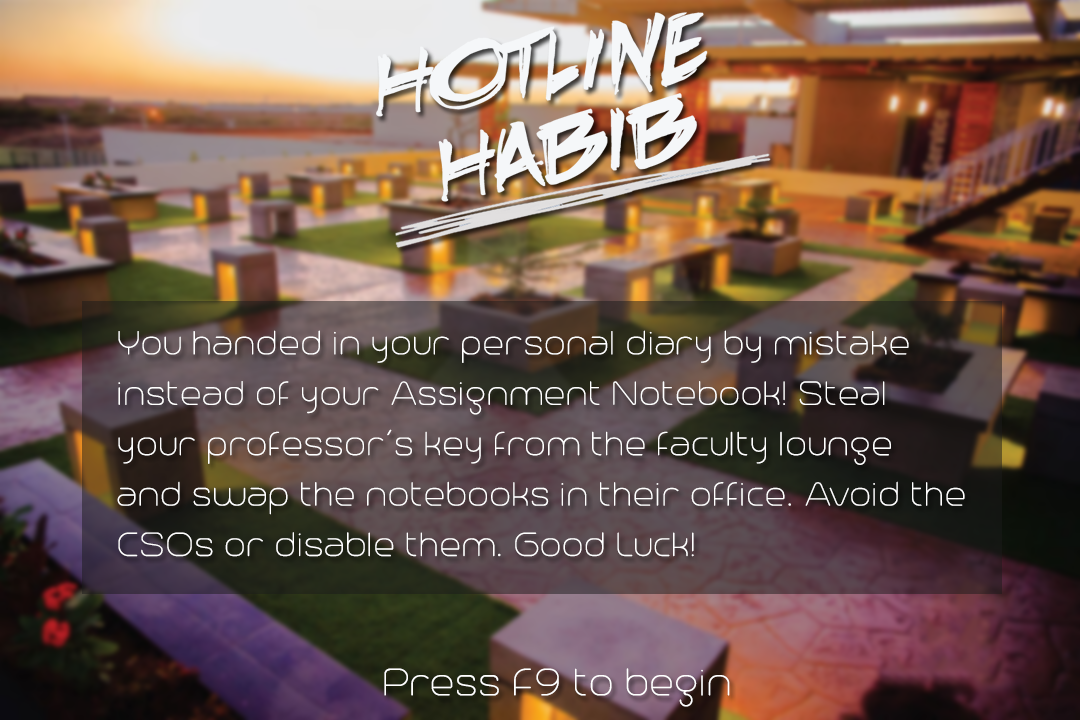
<style>
.page{position:relative;width:1080px;height:720px}
.page>*{position:absolute;margin:0}
.t1{font:42px "Trench-Thin";color:#ffffff}
.t2{font:48px "Trench-Thin";color:#ffffff}
</style>
<div class="page">
<p class="t1" style="left:117px;top:330px;width:848px;height:227px">You handed in your personal diary by mistake<br>instead of your Assignment Notebook! Steal<br>your professor’s key from the faculty lounge<br>and swap the notebooks in their office. Avoid the<br>CSOs or disable them. Good Luck!</p>
<p class="t2" style="left:384px;top:668px;width:346px;height:39px">Press F9 to begin</p>
</div>
